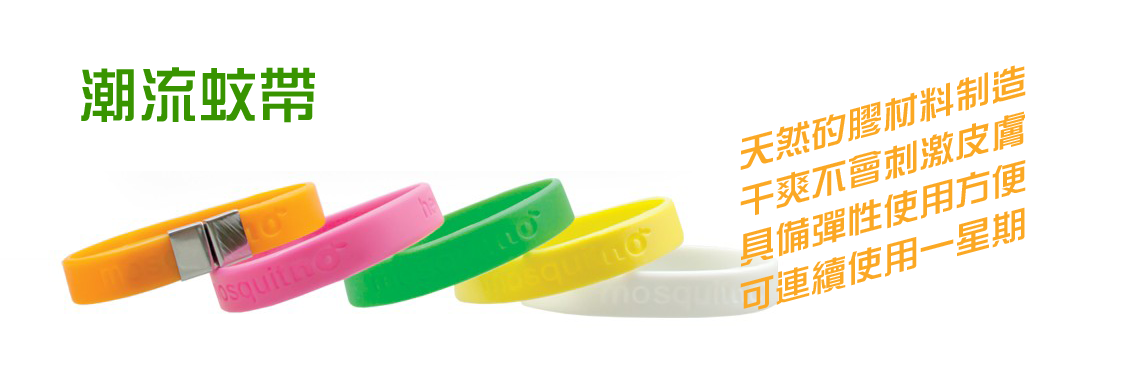
<style>
.page{position:relative;width:1140px;height:380px;background:#ffffff}
.page>*{position:absolute;margin:0}
.t1{font:36px/48px "DFZongYi-W5-WINP-BF";color:#fba824;scale:1.04 1}
.t2{font:60px "DFZongYi-W5-WINP-BF";color:#389400}
</style>
<div class="page">
<p class="t1" style="left:740px;top:65px;width:286px;height:245px;text-align:center;rotate:-15deg">天然矽膠材料制造<br>干爽不會刺激皮膚<br>具備彈性使用方便<br>可連續使用一星期</p>
<p class="t2" style="left:81px;top:67px;width:234px;height:56px">潮流蚊帶</p>
</div>
